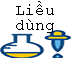
<style>
.page{position:relative;width:71px;height:58px;background:#ffffff}
.page>*{position:absolute;margin:0}
.t1{font:16px/15px "CourierNewPSMT";color:#000000}
</style>
<div class="page">
<p class="t1" style="left:16px;top:1px;width:38px;height:32px;text-align:center">Liều<br>dùng</p>
</div>
